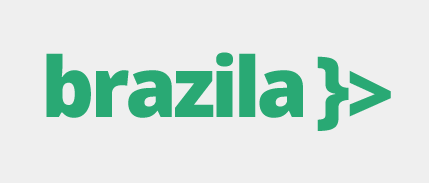
<style>
.page{position:relative;width:429px;height:183px;background:#efefef}
.page>*{position:absolute;margin:0}
.t1{font:83.2px "OpenSans-Extrabold";letter-spacing:-0.05em;color:#29a974}
</style>
<div class="page">
<p class="t1" style="left:46px;top:52px;width:257px;height:66px">brazila</p>
<p class="t1" style="left:317px;top:56px;width:32px;height:75px">}</p>
<p class="t1" style="left:349px;top:70px;width:42px;height:47px">&gt;</p>
</div>
